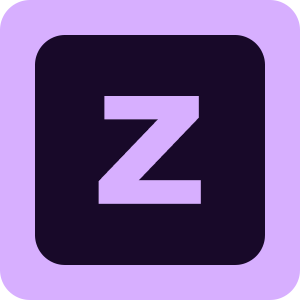
<style>
.page{position:relative;width:300px;height:300px;background:#180929}
.page>*{position:absolute;margin:0}
.t1{font:150px "Arial-Black";letter-spacing:-0.02em;color:#d7afff}
</style>
<div class="page">
<p class="t1" style="left:98px;top:96px;width:103px;height:108px">Z</p>
</div>
